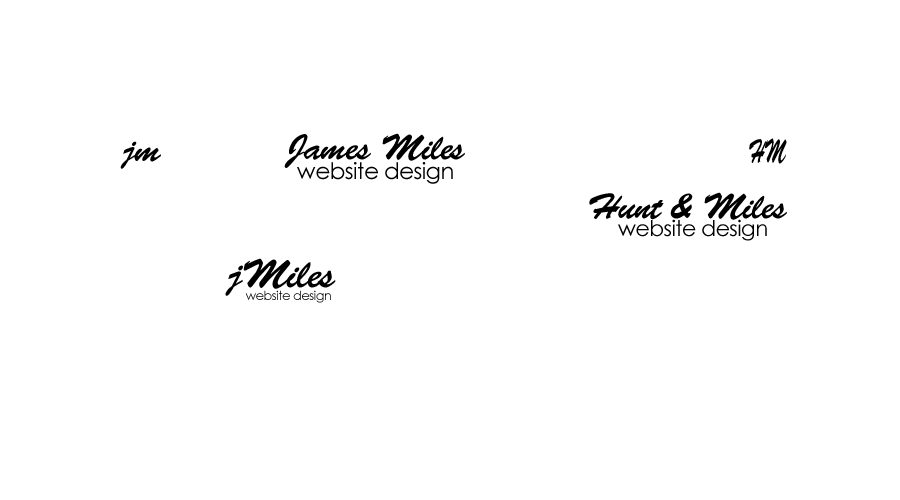
<style>
.page{position:relative;width:900px;height:500px;background:#ffffff}
.page>*{position:absolute;margin:0}
.t1{font:36px "BrushScriptStd";letter-spacing:-0.025em;color:#000000}
.t2{font:33.3px "BrushScriptStd";letter-spacing:-0.025em;color:#000000;scale:0.55 1}
.t3{font:22.8px "CenturyGothic";letter-spacing:-0.025em;color:#000000}
.t4{font:21.8px "CenturyGothic";letter-spacing:-0.025em;color:#000000}
.t5{font:40.2px "BrushScriptStd";letter-spacing:-0.025em;color:#000000}
.t6{font:12.4px "CenturyGothic";letter-spacing:-0.025em;color:#000000}
</style>
<div class="page">
<p class="t1" style="left:284px;top:133px;width:181px;height:35px">James Miles</p>
<p class="t1" style="left:120px;top:141px;width:41px;height:28px">jm</p>
<p class="t2" style="left:749px;top:138px;width:38px;height:26px">HM</p>
<p class="t3" style="left:297px;top:162px;width:156px;height:22px">website design</p>
<p class="t1" style="left:589px;top:192px;width:198px;height:28px">Hunt &amp; Miles</p>
<p class="t4" style="left:618px;top:219px;width:149px;height:22px">website design</p>
<p class="t5" style="left:225px;top:258px;width:111px;height:38px">jMiles</p>
<p class="t6" style="left:245px;top:290px;width:86px;height:13px">website design</p>
</div>
